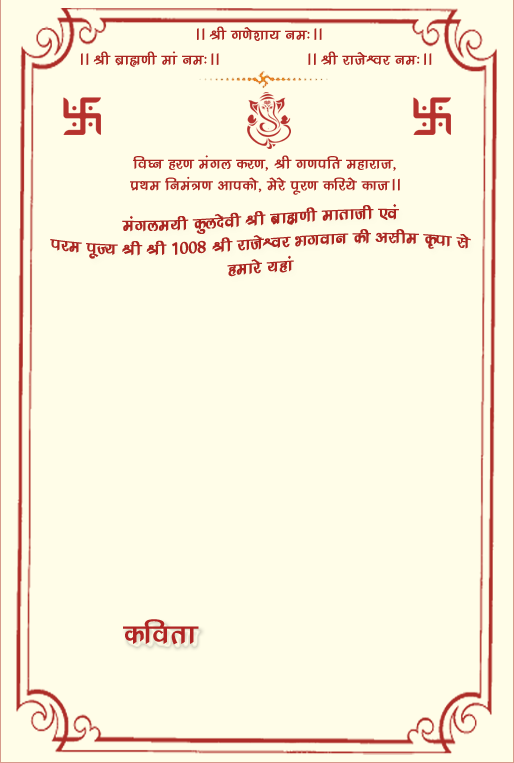
<style>
.page{position:relative;width:514px;height:763px;background:#fffde8}
.page>*{position:absolute;margin:0}
.t1{font:18px "KrutiDev240";color:#aa2621}
.t2{font:20px "KrutiDev240";color:#aa2621}
.t3{font:34px "KrutiDev240";color:#b02423}
</style>
<div class="page">
<p class="t1" style="left:197px;top:26px;width:125px;height:15px">AA Jh x.ks'kk; ue%AA</p>
<p class="t1" style="left:81px;top:51px;width:351px;height:16px">AA Jh czkã.kh eka ue%AA                AA Jh jktsÜoj ue%AA</p>
<p class="t1" style="left:130px;top:155px;width:270px;height:40px;text-align:center">fo?u gj.k eaxy dj.k] Jh x.kifr egkjkt]<br>çFke fuea=.k vkidks] esjs iwj.k dfj;s dktAA</p>
<p class="t2" style="left:50px;top:204px;width:421px;height:73px;text-align:center">eaxye;h dqynsoh Jh czkã.kh ekrkth ,oa <br>ije iwT; Jh Jh 1008 Jh jktsÜoj Hkxoku dh vlhe —ik ls<br>gekjs ;gka</p>
<p class="t3" style="left:123px;top:619px;width:76px;height:26px">dfork</p>
</div>
